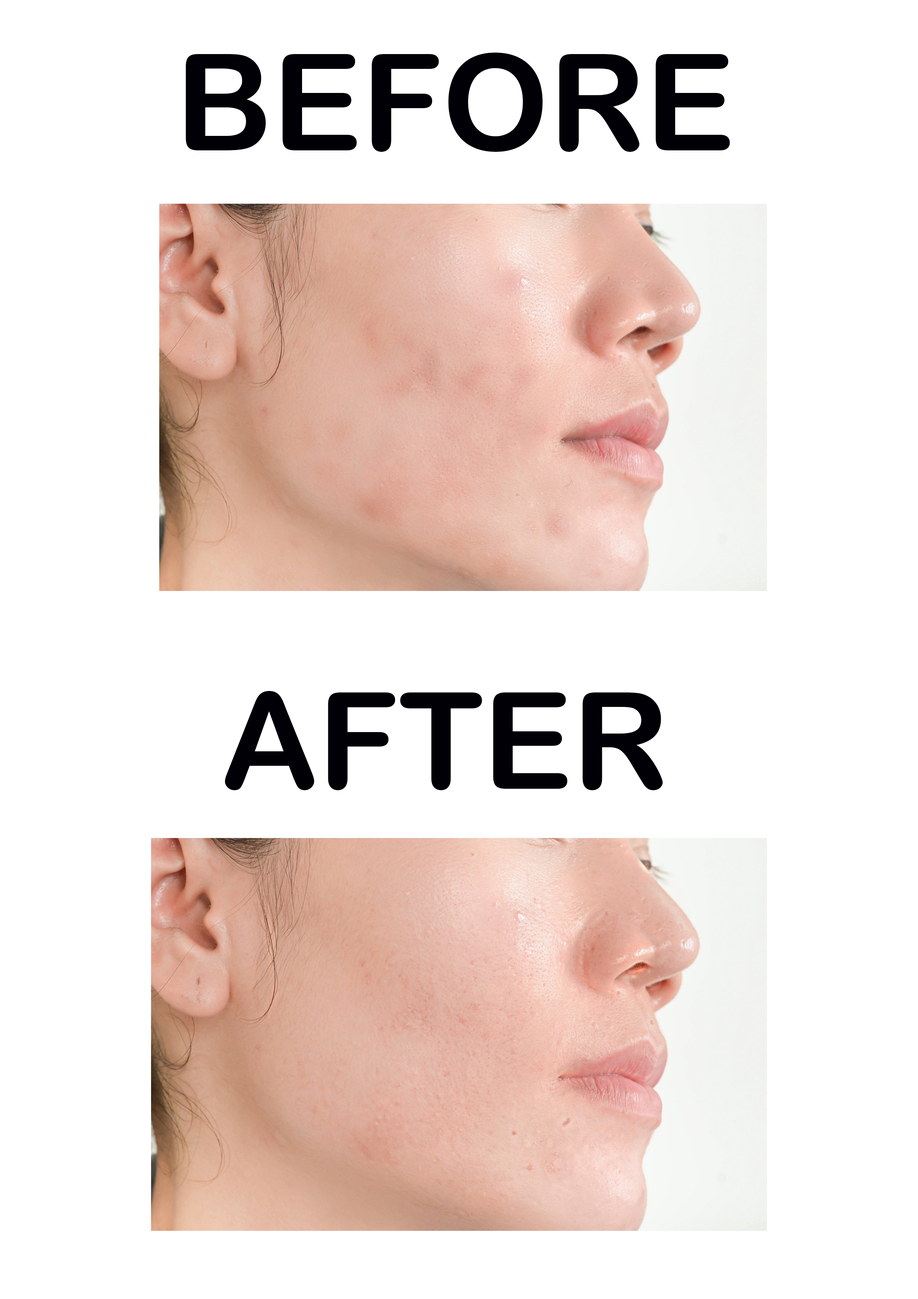
<style>
.page{position:relative;width:918px;height:1299px;background:#ffffff}
.page>*{position:absolute;margin:0}
.t1{font:134.2px "ArialRoundedMTBold";color:#000006}
</style>
<div class="page">
<p class="t1" style="left:186px;top:53px;width:544px;height:99px">BEFORE</p>
<p class="t1" style="left:225px;top:691px;width:438px;height:99px">AFTER</p>
</div>
